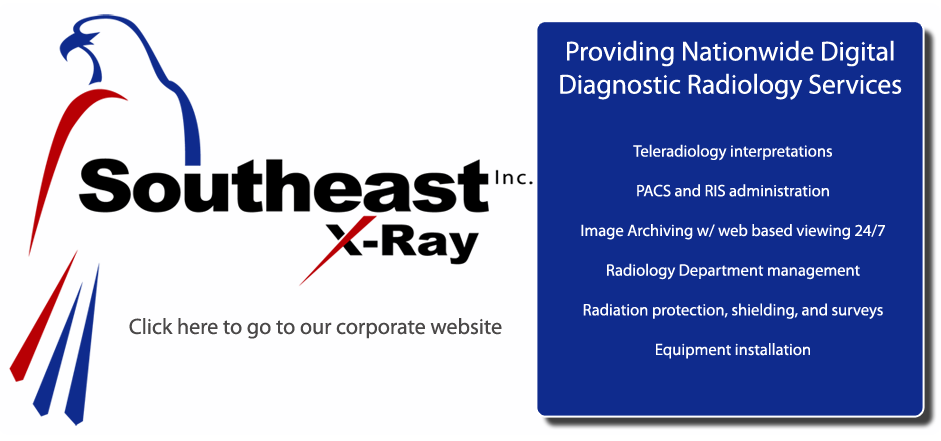
<style>
.page{position:relative;width:941px;height:441px;background:#fefeff}
.page>*{position:absolute;margin:0}
.t1{font:27.6px "MyriadPro-Regular";color:#ffffff}
.t2{font:16.5px "MyriadPro-Regular";color:#ffffff}
.t3{font:22px "MyriadPro-Regular";color:#4a4848}
</style>
<div class="page">
<p class="t1" style="left:560px;top:40px;width:342px;height:60px;text-align:center">Providing Nationwide Digital<br>Diagnostic Radiology Services</p>
<p class="t2" style="left:581px;top:144px;width:304px;height:215px;text-align:center">Teleradiology interpretations<br><br>PACS and RIS administration<br><br>Image Archiving w/ web based viewing 24/7<br><br>Radiology Department management<br><br>Radiation protection, shielding, and surveys<br><br>Equipment installation</p>
<p class="t3" style="left:129px;top:318px;width:373px;height:21px">Click here to go to our corporate website</p>
</div>
